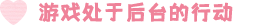
<style>
.page{position:relative;width:265px;height:25px;background:#ffffff}
.page>*{position:absolute;margin:0}
.t1{font:21.2px "shetumodengxiaofangti";color:#ef8299;font-weight:bold}
</style>
<div class="page">
<p class="t1" style="left:39px;top:2px;width:194px;height:20px">游戏处于后台的行动</p>
</div>
